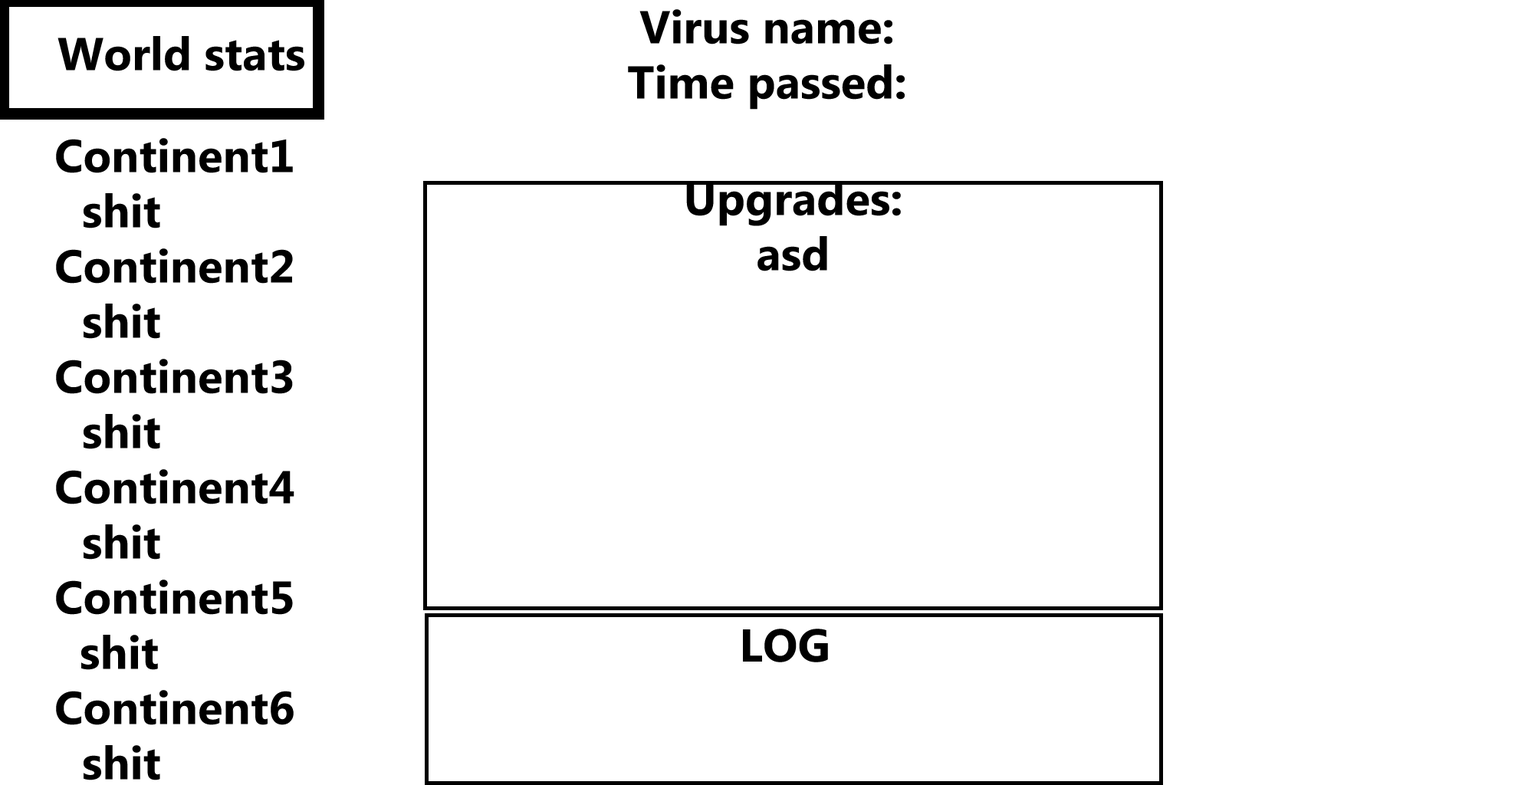
<style>
.page{position:relative;width:1518px;height:785px;background:#ffffff}
.page>*{position:absolute;margin:0}
.t1{font:46px "MicrosoftPhagsPa-Bold";color:#000000}
</style>
<div class="page">
<p class="t1" style="left:628px;top:9px;width:277px;height:101px;text-align:center">Virus name:<br>Time passed:</p>
<p class="t1" style="left:58px;top:36px;width:246px;height:35px">World stats</p>
<p class="t1" style="left:56px;top:138px;width:238px;height:643px">Continent1<br> shit<br>Continent2<br> shit<br>Continent3<br> shit<br>Continent4<br> shit<br>Continent5<br>  shit<br>Continent6<br> shit</p>
<p class="t1" style="left:686px;top:181px;width:215px;height:90px;text-align:center">Upgrades:<br>asd</p>
<p class="t1" style="left:743px;top:629px;width:85px;height:34px">LOG</p>
</div>
